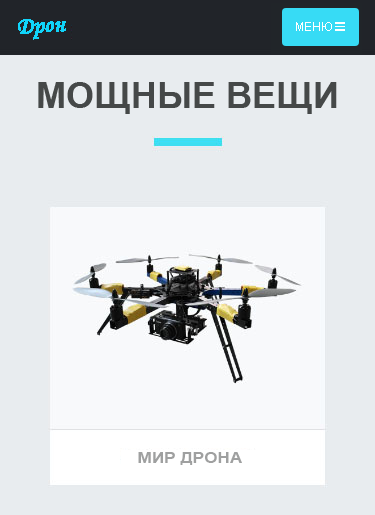
<style>
.page{position:relative;width:375px;height:515px;background:#e8ecef}
.page>*{position:absolute;margin:0}
.t1{font:24px "MonotypeCorsiva";color:#10d4fa}
.t2{font:36px "Arial-BoldMT";color:#454848}
.t3{font:14.9px "Arial-BoldMT";color:#9fa0a0;scale:1.16 1}
</style>
<div class="page">
<p class="t1" style="left:18px;top:19px;width:48px;height:21px;rotate:7deg">Дрон</p>
<p class="t2" style="left:38px;top:82px;width:299px;height:32px">МОЩНЫЕ ВЕЩИ</p>
<p class="t3" style="left:138px;top:452px;width:104px;height:13px">МИР ДРОНА</p>
</div>
